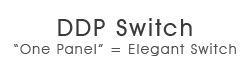
<style>
.page{position:relative;width:250px;height:64px;background:#ffffff}
.page>*{position:absolute;margin:0}
.t1{font:14px/18px "AvantGardeITCbyBT-Book";letter-spacing:0.1em;color:#525252}
.t2{font:24px/18px "AvantGardeITCbyBT-Medium";letter-spacing:0.075em;color:#3b3b3b}
</style>
<div class="page">
<p class="t1" style="left:13px;top:18px;width:223px;height:38px;text-align:justify"><span class="t2">DDP Switch<br></span>“One Panel” = Elegant Switch</p>
</div>
